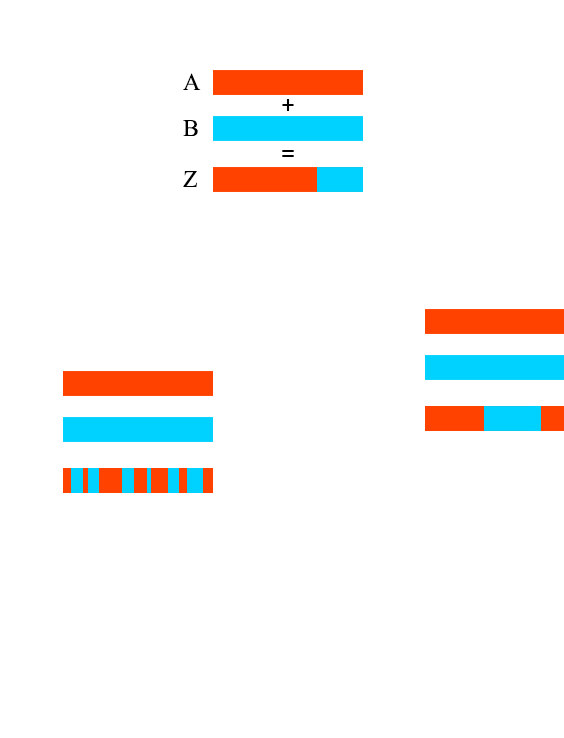
<style>
.page{position:relative;width:564px;height:738px;background:#ffffff}
.page>*{position:absolute;margin:0}
.t1{font:24px "TimesNewRomanPSMT";color:#000000}
.t2{font:24px "ArialMT";color:#000000}
</style>
<div class="page">
<p class="t1" style="left:183px;top:73px;width:18px;height:17px">A</p>
<p class="t2" style="left:282px;top:99px;width:12px;height:12px">+</p>
<p class="t1" style="left:183px;top:120px;width:15px;height:16px">B</p>
<p class="t1" style="left:183px;top:171px;width:14px;height:16px">Z</p>
</div>
